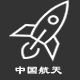
<style>
.page{position:relative;width:80px;height:80px;background:#333333}
.page>*{position:absolute;margin:0}
.t1{font:12px "LiSu";color:#ffffff}
</style>
<div class="page">
<p class="t1" style="left:15px;top:66px;width:47px;height:9px">中国航天</p>
</div>
